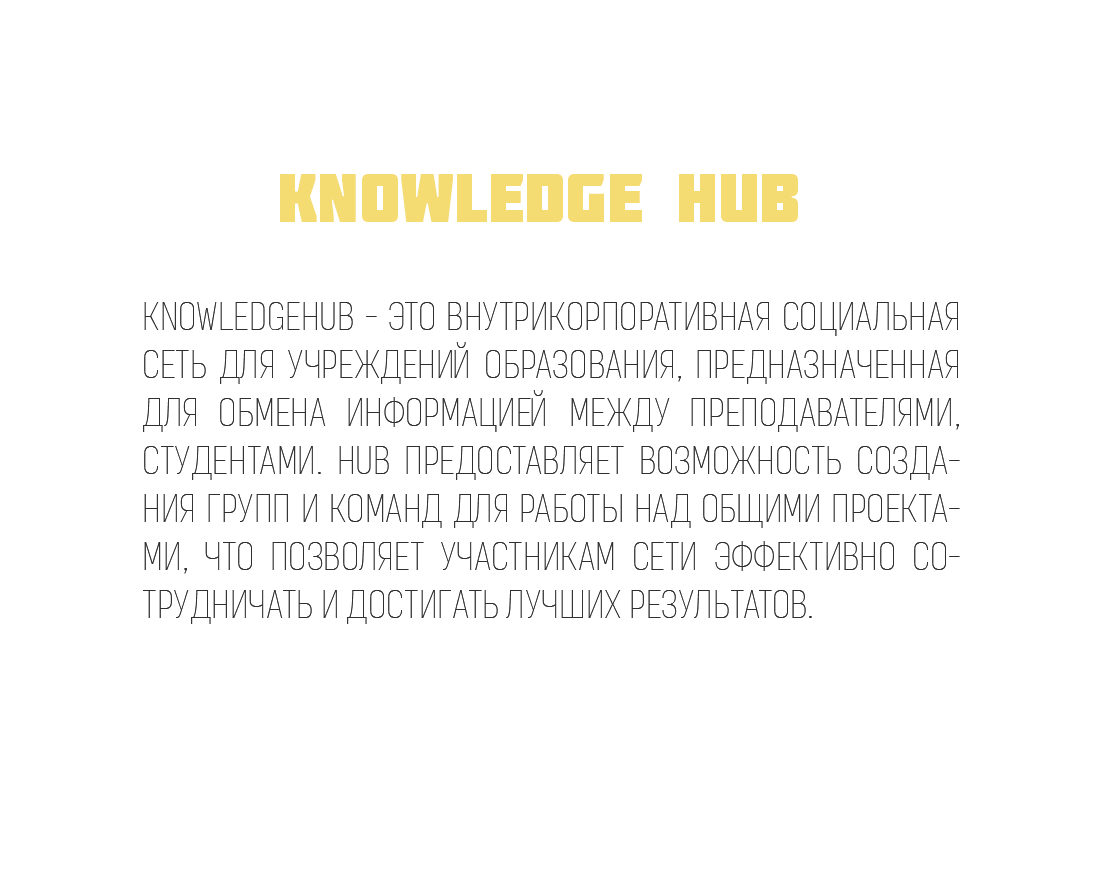
<style>
.page{position:relative;width:1101px;height:881px;background:#ffffff}
.page>*{position:absolute;margin:0}
.t1{font:68.4px "Molot";color:#f4db72}
.t2{font:40px "OrganettoVariable-UltCndHair";color:#2f2f2f}
</style>
<div class="page">
<p class="t1" style="left:280px;top:174px;width:518px;height:48px">Knowledge Hub</p>
<p class="t2" style="left:143px;top:302px;width:817px;height:322px;text-align:justify">KnowledgeHub - это внутрикорпоративная социальная сеть для учреждений образования, предназначенная для обмена информацией между преподавателями, студентами. Hub предоставляет возможность создания групп и команд для работы над общими проектами, что позволяет участникам сети эффективно сотрудничать и достигать лучших результатов.</p>
<p class="t2" style="left:143px;top:302px;width:817px;height:322px;text-align:justify">KnowledgeHub - это внутрикорпоративная социальная сеть для учреждений образования, предназначенная для обмена информацией между преподавателями, студентами. Hub предоставляет возможность создания групп и команд для работы над общими проектами, что позволяет участникам сети эффективно сотрудничать и достигать лучших результатов.</p>
</div>
